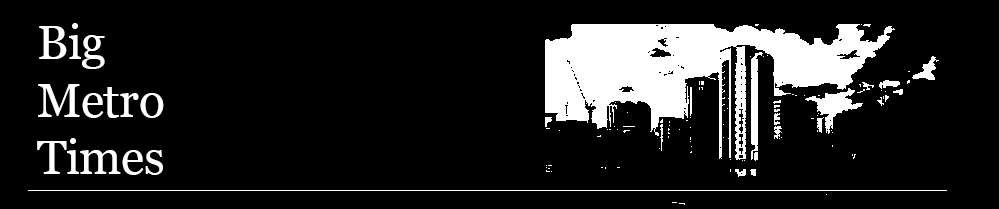
<style>
.page{position:relative;width:999px;height:209px;background:#000000}
.page>*{position:absolute;margin:0}
.t1{font:48px "Georgia";letter-spacing:-0.01em;color:#ffffff}
</style>
<div class="page">
<p class="t1" style="left:37px;top:23px;width:127px;height:152px">Big<br>Metro<br>Times</p>
</div>
